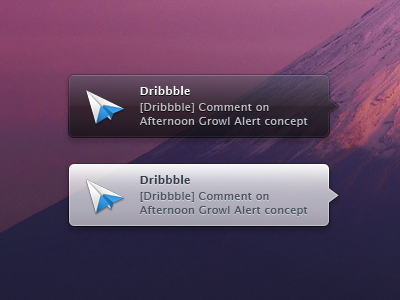
<style>
.page{position:relative;width:400px;height:300px}
.page>*{position:absolute;margin:0}
.t1{font:11px/14px "LucidaSansUnicode";letter-spacing:0.018em;color:#bdbdc3}
.t2{font:11px/15px "LucidaSans-Demi";letter-spacing:0.018em;color:#ffffff}
.t3{font:11px/15px "LucidaSansUnicode";letter-spacing:0.018em;color:#bdbdc3}
.t4{font:11px/16px "LucidaSansUnicode";letter-spacing:0.018em;color:#bdbdc3}
.t5{font:11px/14px "LucidaSansUnicode";letter-spacing:0.018em;color:#4c545d}
.t6{font:11px/15px "LucidaSans-Demi";letter-spacing:0.018em;color:#2f3b48}
.t7{font:11px/15px "LucidaSansUnicode";letter-spacing:0.018em;color:#4c545d}
.t8{font:11px/16px "LucidaSansUnicode";letter-spacing:0.018em;color:#4c545d}
</style>
<div class="page">
<p class="t1" style="left:139px;top:86px;width:169px;height:41px"><span class="t2">Dribbble<br></span><span class="t3">[Dribbble</span><span class="t4">] Co</span>mment on <br>Afternoon Growl Alert concept</p>
<p class="t5" style="left:139px;top:175px;width:169px;height:41px"><span class="t6">Dribbble<br></span><span class="t7">[Dribbble</span><span class="t8">] Co</span>mment on <br>Afternoon Growl Alert concept</p>
</div>
